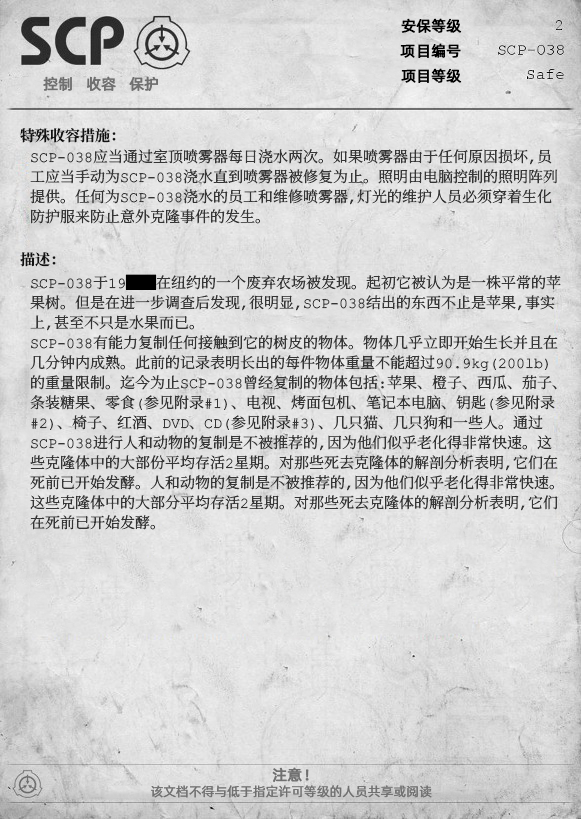
<style>
.page{position:relative;width:581px;height:819px}
.page>*{position:absolute;margin:0}
.t1{font:15px "AlibabaPuHuiTiR";color:#000000;font-weight:bold}
.t2{font:15px "AlibabaPuHuiTiR";color:#707070;font-weight:bold}
.t3{font:15px "ContainmentBreach-Bold";color:#121212}
.t4{font:15px/20px "ContainmentBreach-Regular";color:#353535}
.t5{font:15px/20px "ContainmentBreach-Regular";color:#000000}
.t6{font:13px "AlibabaPuHuiTiR";color:#707070}
</style>
<div class="page">
<p class="t1" style="left:401px;top:18px;width:61px;height:15px">安保等级</p>
<p class="t1" style="left:400px;top:43px;width:61px;height:15px">项目编号</p>
<p class="t2" style="left:43px;top:76px;width:115px;height:15px">控制   收容   保护</p>
<p class="t1" style="left:401px;top:68px;width:61px;height:15px">项目等级</p>
<p class="t3" style="left:20px;top:128px;width:96px;height:15px">特殊收容措施：</p>
<p class="t4" style="left:30px;top:149px;width:528px;height:75px">SCP-038应当通过室顶喷雾器每日浇水两次。如果喷雾器由于任何原因损坏，员<br>工应当手动为SCP-038浇水直到喷雾器被修复为止。照明由电脑控制的照明阵列<br>提供。任何为SCP-038浇水的员工和维修喷雾器，灯光的维护人员必须穿着生化<br>防护服来防止意外克隆事件的发生。</p>
<p class="t3" style="left:20px;top:252px;width:36px;height:15px">描述：</p>
<p class="t4" style="left:30px;top:274px;width:531px;height:256px">SCP-038于19<span class="t5">██</span>在纽约的一个废弃农场被发现。起初它被认为是一株平常的苹<br>果树。但是在进一步调查后发现，很明显，SCP-038结出的东西不止是苹果，事实<br>上，甚至不只是水果而已。<br>SCP-038有能力复制任何接触到它的树皮的物体。物体几乎立即开始生长并且在<br>几分钟内成熟。此前的记录表明长出的每件物体重量不能超过90.9kg（200lb） <br>的重量限制。迄今为止SCP-038曾经复制的物体包括：苹果、橙子、西瓜、茄子、<br>条装糖果、零食（参见附录#1）、电视、烤面包机、笔记本电脑、钥匙（参见附录<br>#2）、椅子、红酒、DVD、CD（参见附录#3）、几只猫、几只狗和一些人。通过<br>SCP-038进行人和动物的复制是不被推荐的，因为他们似乎老化得非常快速。这<br>些克隆体中的大部份平均存活2星期。对那些死去克隆体的解剖分析表明，它们在<br>死前已开始发酵。人和动物的复制是不被推荐的，因为他们似乎老化得非常快速。<br>这些克隆体中的大部分平均存活2星期。对那些死去克隆体的解剖分析表明，它们<br>在死前已开始发酵。</p>
<p class="t2" style="left:272px;top:767px;width:37px;height:15px">注意！</p>
<p class="t6" style="left:151px;top:785px;width:281px;height:13px">该文档不得与低于指定许可等级的人员共享或阅读</p>
</div>
